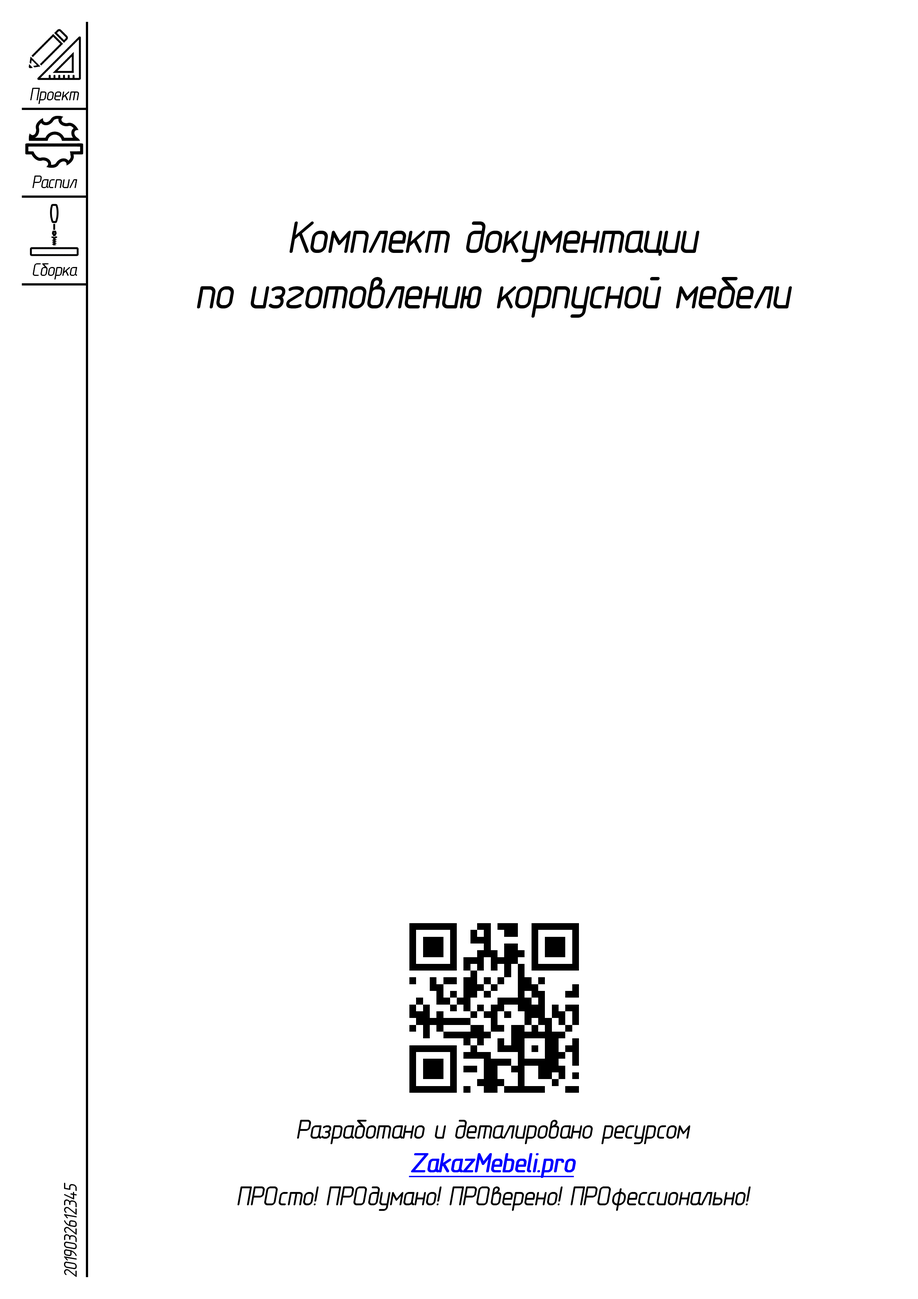
<style>
.page{position:relative;width:918px;height:1299px;background:#ffffff}
.page>*{position:absolute;margin:0}
.t1{font:18.5px "GOSTTypeB";letter-spacing:-0.075em;color:#000000;font-style:italic}
.t2{font:46.3px "GOSTTypeB";letter-spacing:-0.075em;color:#000000;font-style:italic}
.t3{font:27.8px "GOSTTypeB";letter-spacing:-0.075em;color:#000000;font-style:italic}
.t4{font:27.8px "GOSTTypeB";letter-spacing:-0.075em;color:#0000ff;font-weight:bold;font-style:italic;text-decoration:underline}
</style>
<div class="page">
<p class="t1" style="left:30px;top:88px;width:49px;height:16px">Проект</p>
<p class="t1" style="left:32px;top:175px;width:45px;height:13px">Распил</p>
<p class="t2" style="left:197px;top:221px;width:595px;height:97px;text-align:center">Комплект документации<br>по изготовлению корпусной мебели</p>
<p class="t1" style="left:33px;top:263px;width:44px;height:17px">Сборка</p>
<p class="t3" style="left:237px;top:1120px;width:514px;height:91px;text-align:center">Разработано и деталировано ресурсом<br><span class="t4">ZakazMebeli.pro<br></span>ПРОсто! ПРОдумано! ПРОверено! ПРОфессионально!</p>
<p class="t1" style="left:64px;top:1182px;width:13px;height:95px;rotate:-90deg">2019032612345</p>
</div>
